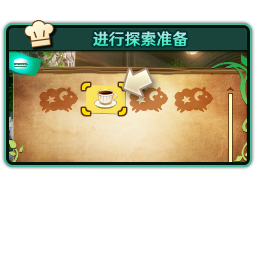
<style>
.page{position:relative;width:256px;height:256px;background:#ffffff}
.page>*{position:absolute;margin:0}
.t1{font:16px "HYWenHei-FEW";letter-spacing:0.025em;scale:0.97 1}
</style>
<div class="page">
<p class="t1" style="left:93px;top:31px;width:95px;height:16px">进行探索准备</p>
</div>
